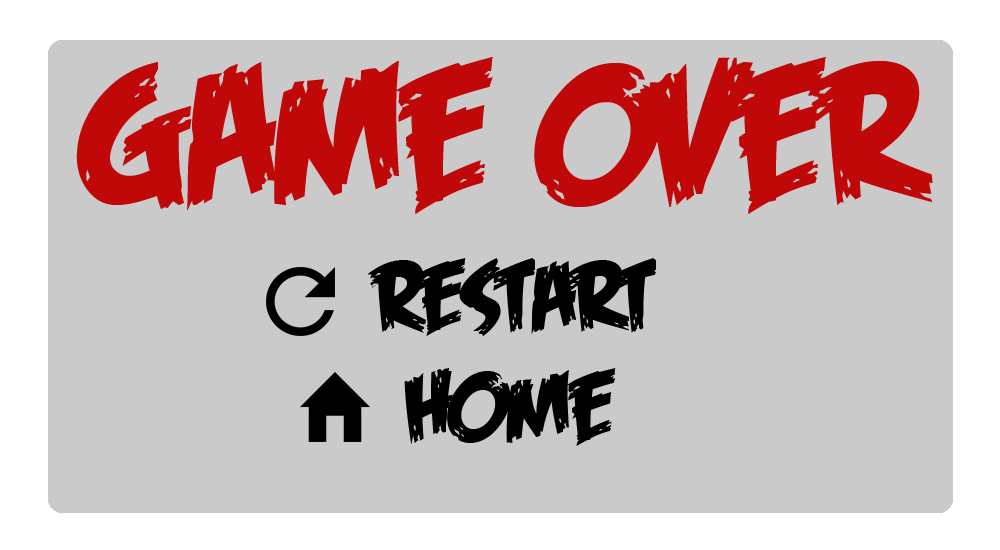
<style>
.page{position:relative;width:1000px;height:550px;background:#cacaca}
.page>*{position:absolute;margin:0}
.t1{font:200px "FeastofFleshBB";color:#c10808}
.t2{font:100px "FeastofFleshBB";color:#000000}
</style>
<div class="page">
<p class="t1" style="left:76px;top:56px;width:857px;height:158px">Game Over</p>
<p class="t2" style="left:368px;top:258px;width:288px;height:78px">Restart</p>
<p class="t2" style="left:404px;top:368px;width:212px;height:78px">Home</p>
</div>
